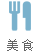
<style>
.page{position:relative;width:40px;height:55px;background:#ffffff}
.page>*{position:absolute;margin:0}
.t1{font:22.5px "SimSun";letter-spacing:0.1em;color:#666666;font-variant:small-caps}
</style>
<div class="page">
<p class="t1" style="left:7px;top:39px;width:26px;height:12px">美食</p>
</div>
